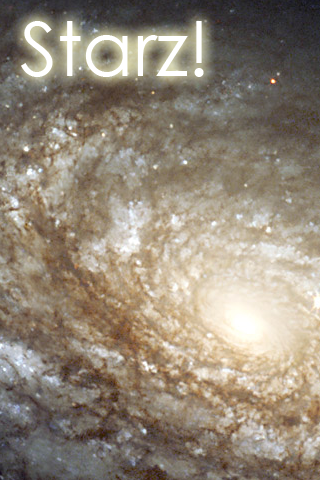
<style>
.page{position:relative;width:320px;height:480px}
.page>*{position:absolute;margin:0}
.t1{font:75px "CenturyGothic";color:#ffffff}
</style>
<div class="page">
<p class="t1" style="left:21px;top:21px;width:183px;height:56px">Starz!</p>
</div>
